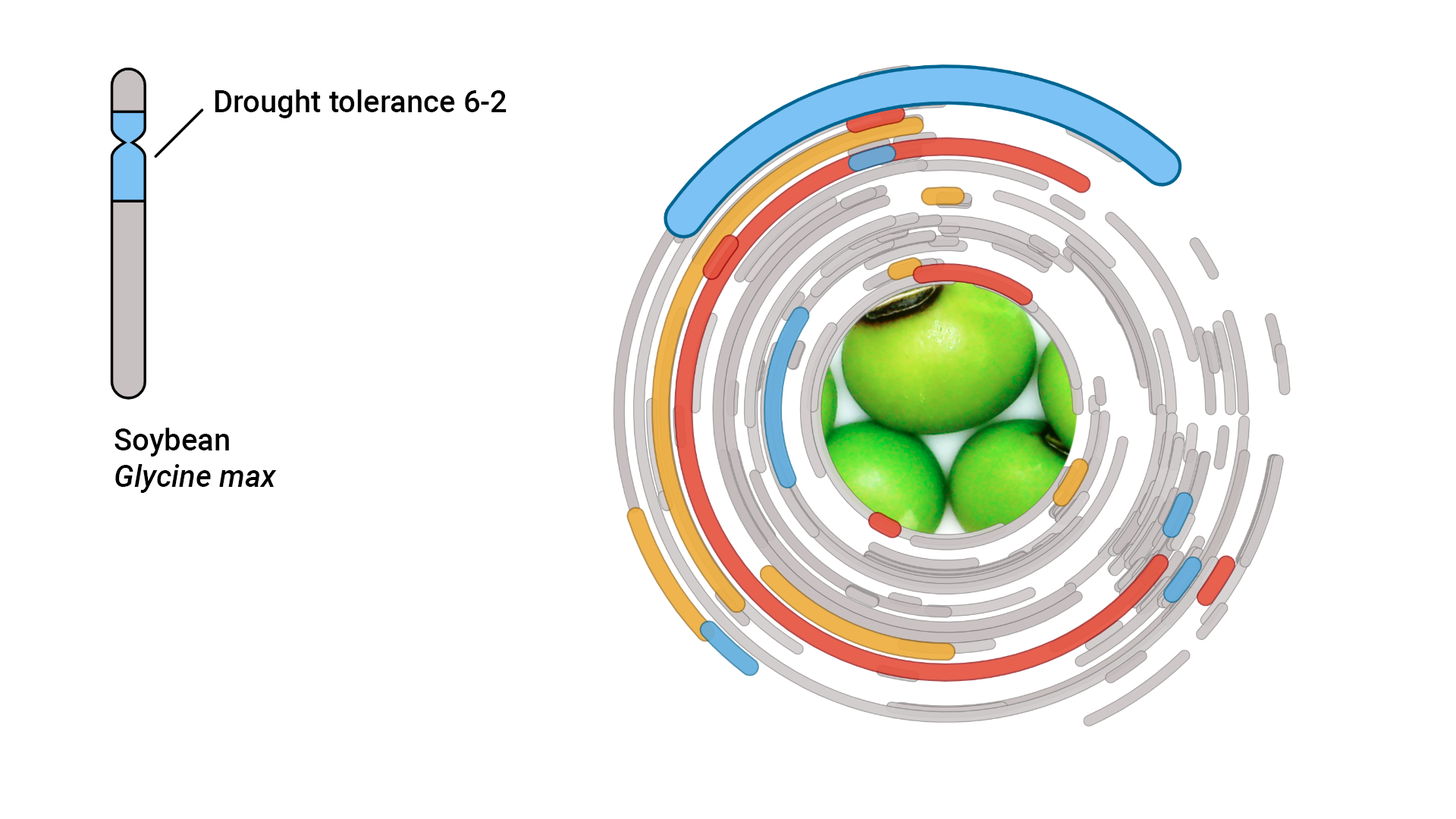
<style>
.page{position:relative;width:1456px;height:819px;background:#ffffff}
.page>*{position:absolute;margin:0}
.t1{font:30.3px "Roboto-Medium";color:#000000}
.t2{font:30.3px "Roboto-MediumItalic";color:#000000}
</style>
<div class="page">
<p class="t1" style="left:215px;top:89px;width:292px;height:29px">Drought tolerance 6-2</p>
<p class="t2" style="left:115px;top:428px;width:162px;height:65px"><span class="t1">Soybean<br></span>Glycine max</p>
</div>
